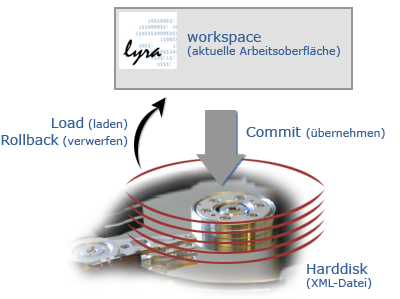
<style>
.page{position:relative;width:400px;height:299px;background:#ffffff}
.page>*{position:absolute;margin:0}
.t1{font:11px "Verdana";color:#356098}
.t2{font:14px "Verdana";color:#356098}
</style>
<div class="page">
<p class="t1" style="left:187px;top:31px;width:153px;height:26px"><span class="t2">workspace<br></span>(aktuelle Arbeitsoberfläche)</p>
<p class="t1" style="left:1px;top:117px;width:127px;height:30px;text-align:right"><span class="t2">Load</span> (laden)<br><span class="t2">Rollback</span> (verwerfen)</p>
<p class="t1" style="left:246px;top:127px;width:139px;height:12px"><span class="t2">Commit </span>(übernehmen)</p>
<p class="t1" style="left:306px;top:263px;width:66px;height:26px"><span class="t2">Harddisk<br></span>(XML-Datei)</p>
</div>
